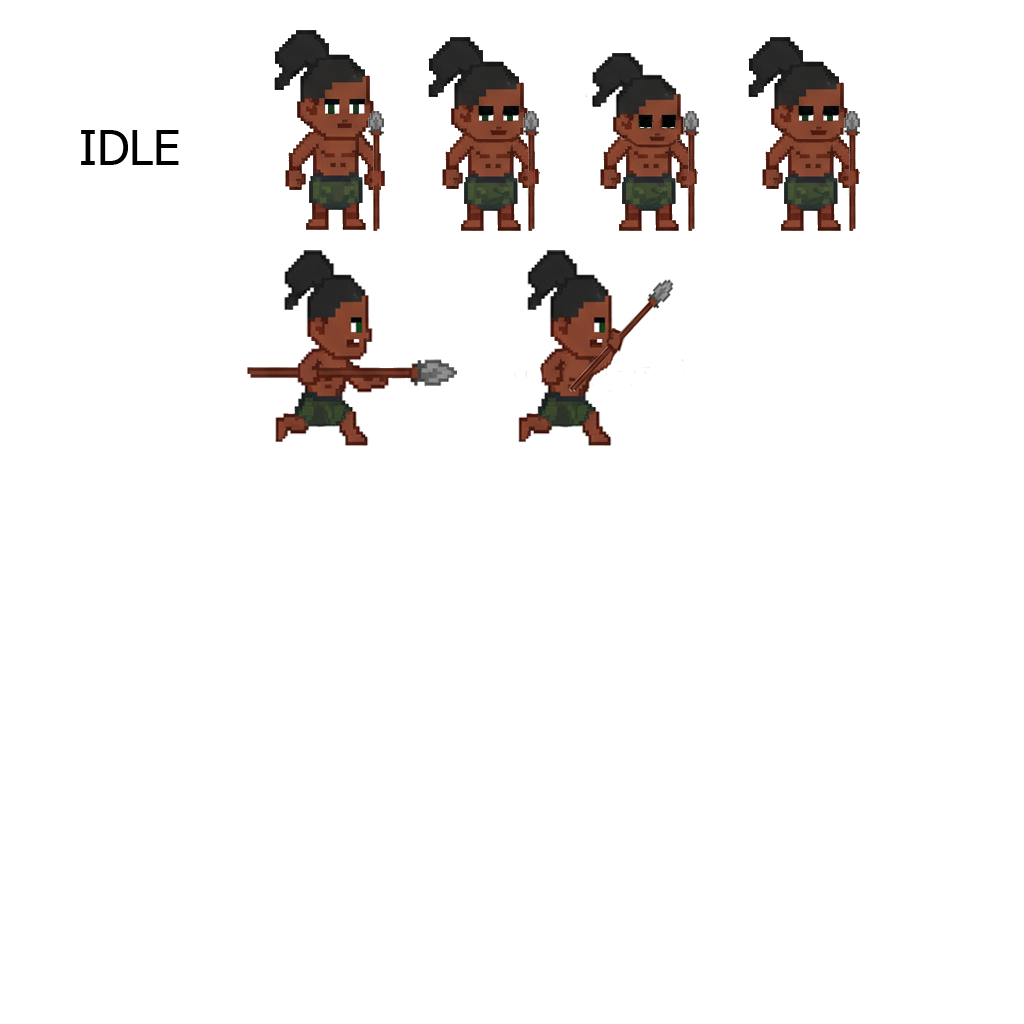
<style>
.page{position:relative;width:1024px;height:1024px;background:#ffffff}
.page>*{position:absolute;margin:0}
.t1{font:48px "Tahoma";color:#000000}
</style>
<div class="page">
<p class="t1" style="left:81px;top:130px;width:98px;height:35px">IDLE</p>
</div>
